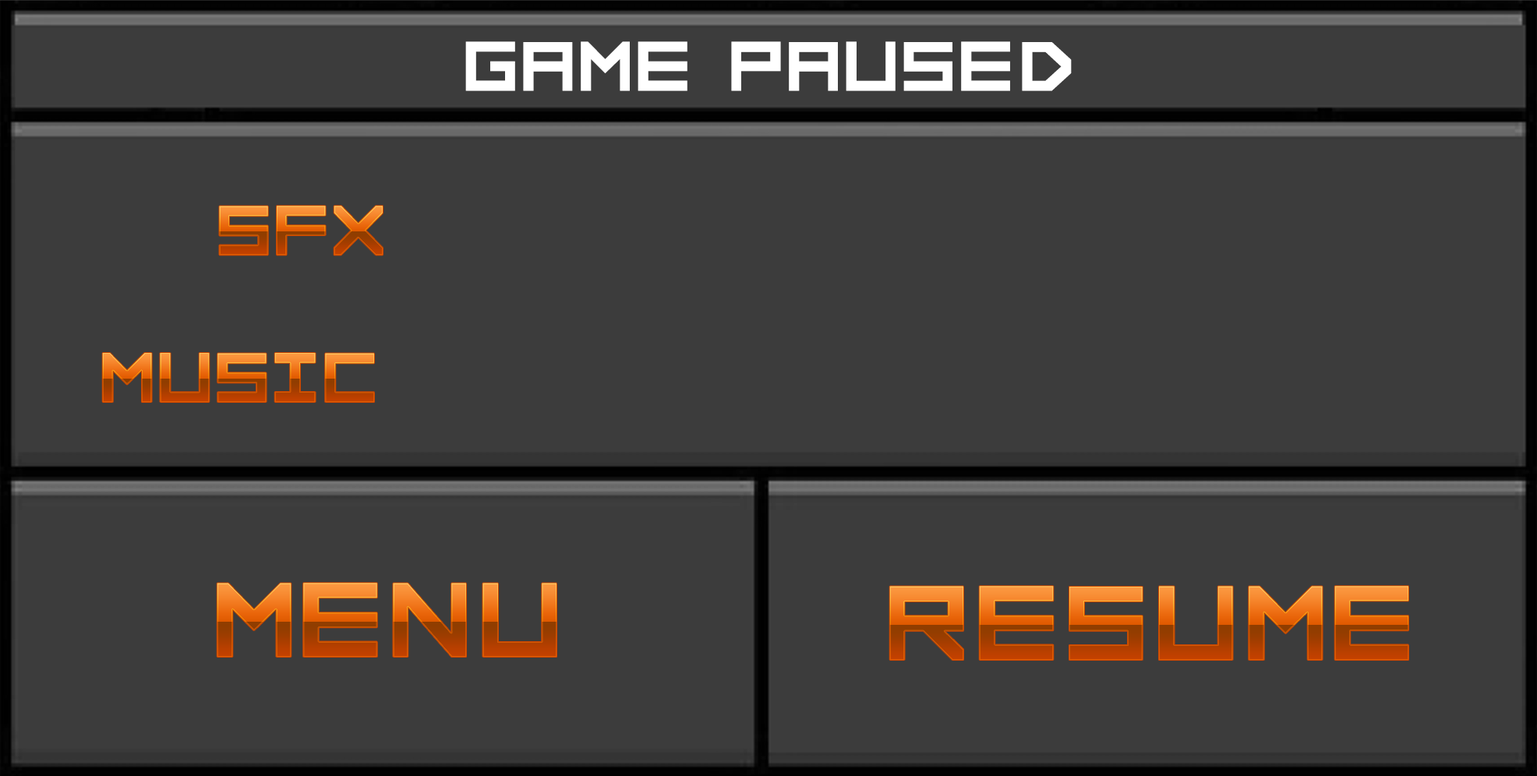
<style>
.page{position:relative;width:1537px;height:776px;background:#3c3c3c}
.page>*{position:absolute;margin:0}
.t1{font:93.3px "FORCED-SQUARE";color:#ffffff;text-transform:uppercase}
.t2{font:93.3px "FORCED-SQUARE";text-transform:uppercase}
.t3{font:140.3px "FORCED-SQUARE";text-transform:uppercase}
</style>
<div class="page">
<p class="t1" style="left:465px;top:41px;width:606px;height:50px">GAME PAUSED</p>
<p class="t2" style="left:219px;top:206px;width:164px;height:50px">SFX</p>
<p class="t2" style="left:102px;top:353px;width:272px;height:49px">MUSIC</p>
<p class="t3" style="left:217px;top:583px;width:339px;height:74px">MENU</p>
<p class="t3" style="left:889px;top:586px;width:519px;height:74px">RESUME</p>
</div>
